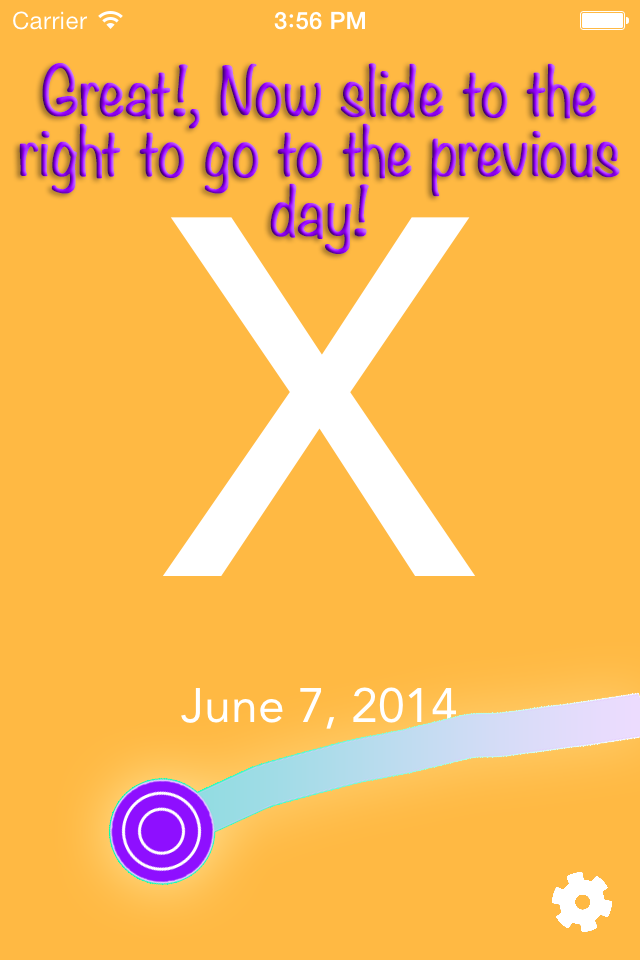
<style>
.page{position:relative;width:640px;height:960px;background:#ffb943}
.page>*{position:absolute;margin:0}
.t1{font:60px/60px "Noteworthy-Light";letter-spacing:-0.01em;font-weight:bold}
</style>
<div class="page">
<p class="t1" style="left:19px;top:63px;width:601px;height:191px;text-align:center">Great!, Now slide to the<br>right to go to the previous<br>day!</p>
</div>
